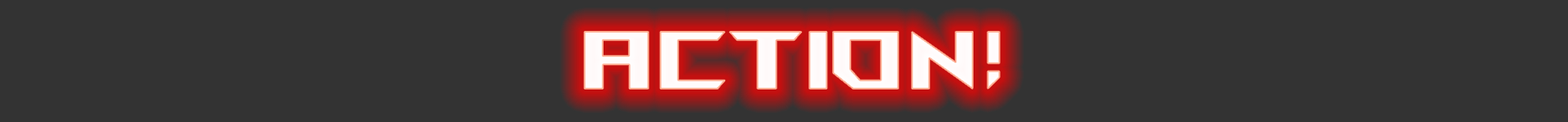
<style>
.page{position:relative;width:1568px;height:122px;background:#333333}
.page>*{position:absolute;margin:0}
.t1{font:81.7px "AniMeMatrix-MB_EN";color:#ffffff}
</style>
<div class="page">
<p class="t1" style="left:584px;top:32px;width:416px;height:57px">ACTION!</p>
</div>
